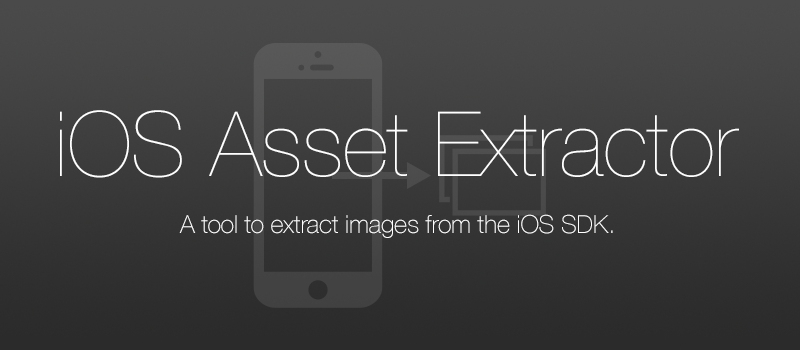
<style>
.page{position:relative;width:800px;height:350px}
.page>*{position:absolute;margin:0}
.t1{font:90px "HelveticaNeue-UltraLight";letter-spacing:-0.007em;color:#ffffff}
.t2{font:25px "HelveticaNeue-Thin";letter-spacing:-0.007em;color:#ffffff}
</style>
<div class="page">
<p class="t1" style="left:60px;top:110px;width:679px;height:68px">iOS Asset Extractor</p>
<p class="t2" style="left:179px;top:214px;width:434px;height:24px">A tool to extract images from the iOS SDK.</p>
</div>
